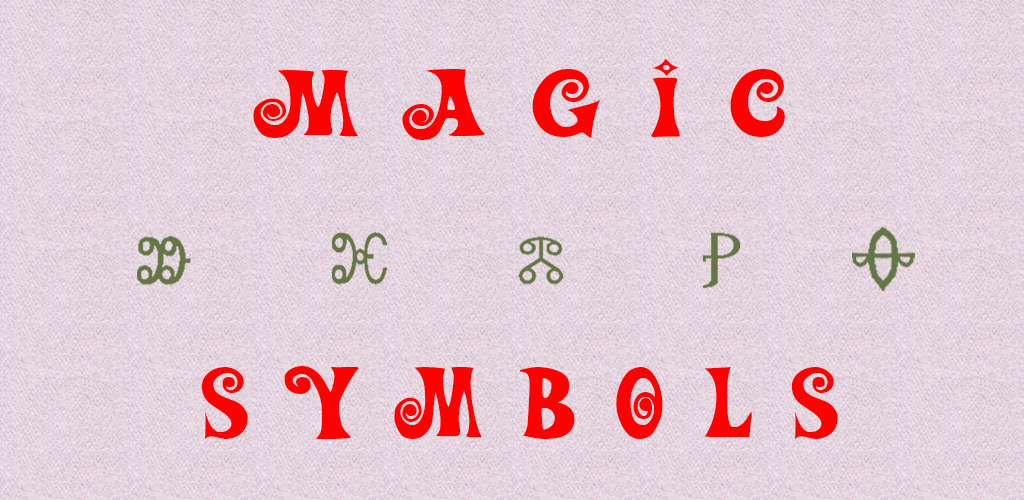
<style>
.page{position:relative;width:1024px;height:500px}
.page>*{position:absolute;margin:0}
.t1{font:96.4px "ActionIs";color:#ff0000;scale:1.63 1}
.t2{font:101.2px "ActionIs";color:#ff0000;scale:1.3 1}
</style>
<div class="page">
<p class="t1" style="left:253px;top:59px;width:532px;height:81px">M A G I C</p>
<p class="t2" style="left:201px;top:366px;width:637px;height:74px">S Y M B O L S</p>
</div>
